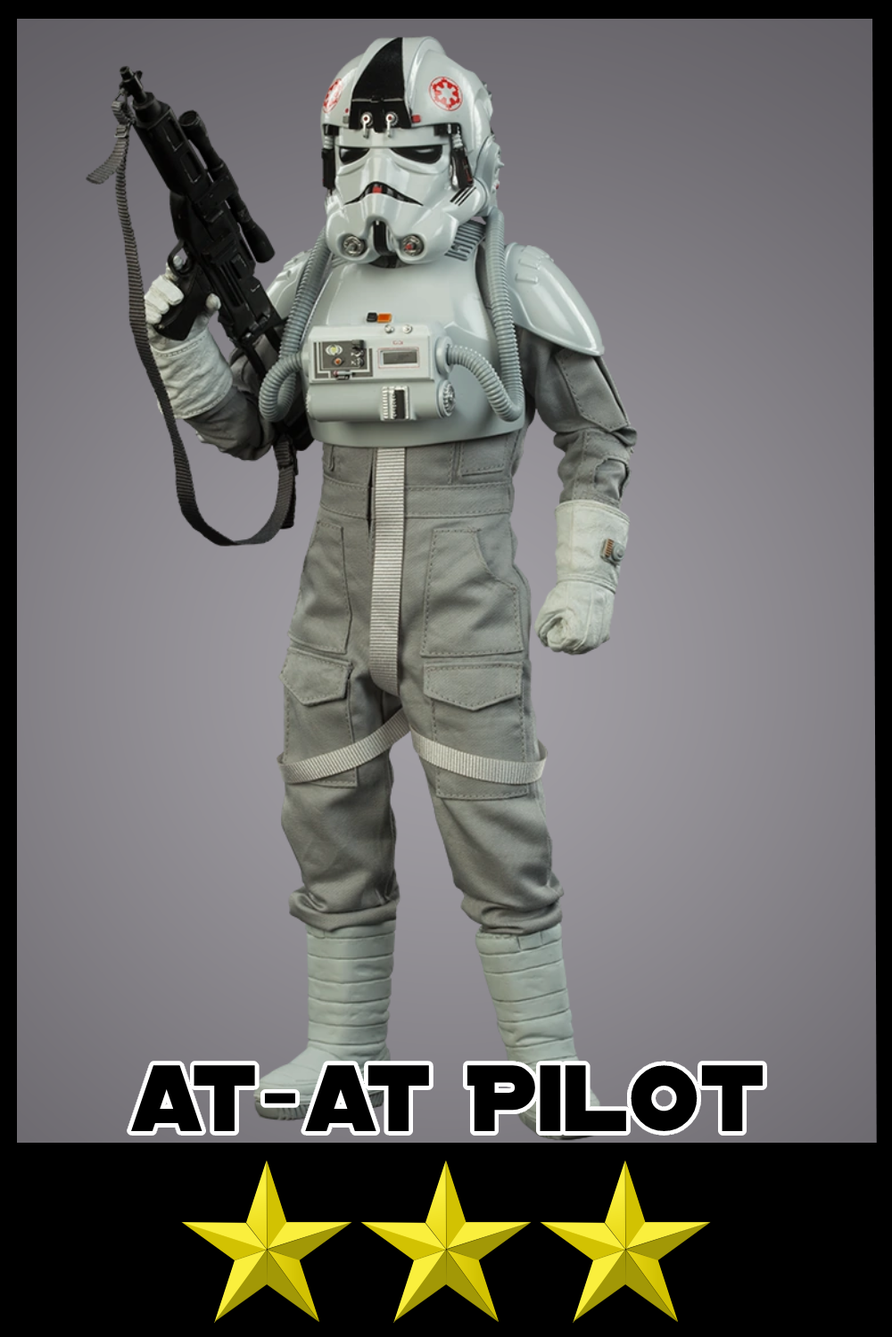
<style>
.page{position:relative;width:892px;height:1337px}
.page>*{position:absolute;margin:0}
.t1{font:101.1px "DistantGalaxy";color:#000000}
</style>
<div class="page">
<p class="t1" style="left:131px;top:1065px;width:631px;height:66px">at-at Pilot</p>
</div>
